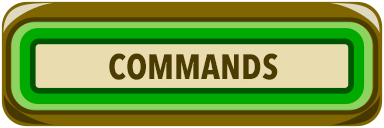
<style>
.page{position:relative;width:384px;height:128px;background:#e9ddaf}
.page>*{position:absolute;margin:0}
.t1{font:35px "AvenirNextCondensed-Bold";color:#4c3c00}
</style>
<div class="page">
<p class="t1" style="left:109px;top:53px;width:169px;height:27px">COMMANDS</p>
</div>
